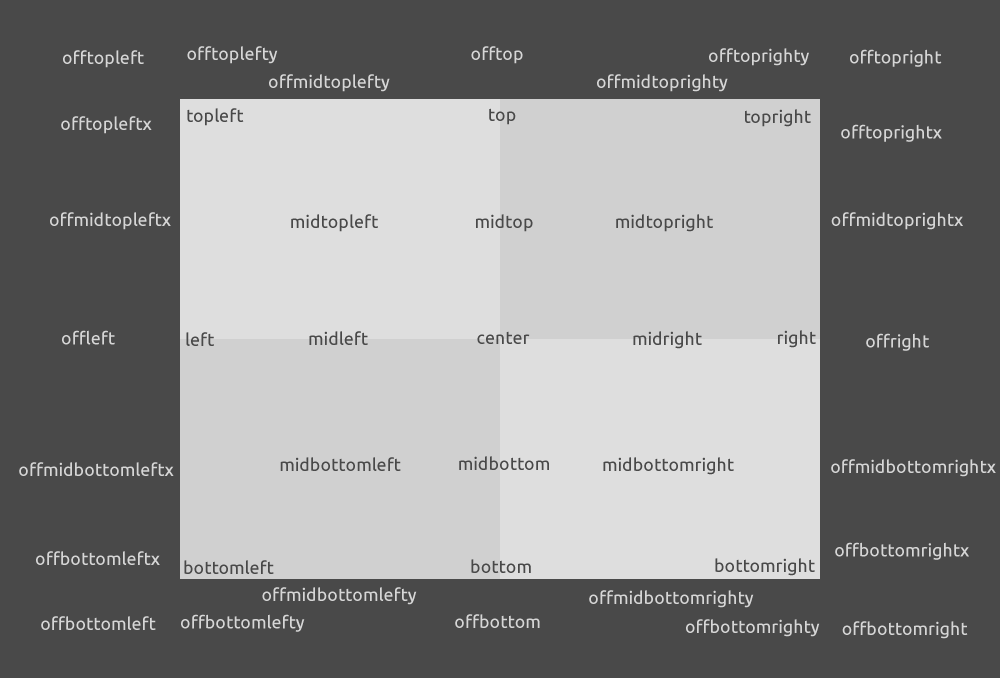
<style>
.page{position:relative;width:1000px;height:678px;background:#494949}
.page>*{position:absolute;margin:0}
.t1{font:18px "Ubuntu";color:#d6d6d6}
.t2{font:18px "Ubuntu";color:#494949}
</style>
<div class="page">
<p class="t1" style="left:63px;top:50px;width:81px;height:18px">offtopleft</p>
<p class="t1" style="left:187px;top:46px;width:91px;height:18px">offtoplefty</p>
<p class="t1" style="left:471px;top:46px;width:52px;height:18px">offtop</p>
<p class="t1" style="left:709px;top:48px;width:100px;height:18px">offtoprighty</p>
<p class="t1" style="left:850px;top:49px;width:92px;height:18px">offtopright</p>
<p class="t1" style="left:269px;top:74px;width:121px;height:18px">offmidtoplefty</p>
<p class="t1" style="left:597px;top:74px;width:131px;height:18px">offmidtoprighty</p>
<p class="t2" style="left:187px;top:108px;width:57px;height:18px">topleft</p>
<p class="t2" style="left:489px;top:108px;width:27px;height:17px">top</p>
<p class="t2" style="left:745px;top:109px;width:66px;height:18px">topright</p>
<p class="t1" style="left:61px;top:116px;width:91px;height:18px">offtopleftx</p>
<p class="t1" style="left:841px;top:124px;width:101px;height:18px">offtoprightx</p>
<p class="t1" style="left:50px;top:212px;width:121px;height:18px">offmidtopleftx</p>
<p class="t2" style="left:291px;top:214px;width:87px;height:18px">midtopleft</p>
<p class="t2" style="left:476px;top:214px;width:57px;height:18px">midtop</p>
<p class="t2" style="left:616px;top:214px;width:97px;height:18px">midtopright</p>
<p class="t1" style="left:831px;top:212px;width:132px;height:18px">offmidtoprightx</p>
<p class="t1" style="left:62px;top:330px;width:53px;height:15px">offleft</p>
<p class="t2" style="left:186px;top:332px;width:28px;height:14px">left</p>
<p class="t2" style="left:309px;top:331px;width:59px;height:14px">midleft</p>
<p class="t2" style="left:477px;top:331px;width:53px;height:13px">center</p>
<p class="t2" style="left:633px;top:331px;width:69px;height:18px">midright</p>
<p class="t2" style="left:778px;top:330px;width:38px;height:18px">right</p>
<p class="t1" style="left:866px;top:333px;width:63px;height:18px">offright</p>
<p class="t1" style="left:19px;top:462px;width:155px;height:14px">offmidbottomleftx</p>
<p class="t2" style="left:280px;top:457px;width:121px;height:14px">midbottomleft</p>
<p class="t2" style="left:459px;top:456px;width:90px;height:14px">midbottom</p>
<p class="t2" style="left:603px;top:457px;width:131px;height:18px">midbottomright</p>
<p class="t1" style="left:831px;top:459px;width:165px;height:18px">offmidbottomrightx</p>
<p class="t1" style="left:835px;top:542px;width:134px;height:18px">offbottomrightx</p>
<p class="t1" style="left:36px;top:551px;width:124px;height:14px">offbottomleftx</p>
<p class="t2" style="left:715px;top:558px;width:100px;height:18px">bottomright</p>
<p class="t2" style="left:184px;top:560px;width:90px;height:14px">bottomleft</p>
<p class="t2" style="left:471px;top:559px;width:60px;height:14px">bottom</p>
<p class="t1" style="left:262px;top:587px;width:155px;height:18px">offmidbottomlefty</p>
<p class="t1" style="left:589px;top:590px;width:165px;height:18px">offmidbottomrighty</p>
<p class="t1" style="left:41px;top:616px;width:115px;height:14px">offbottomleft</p>
<p class="t1" style="left:181px;top:614px;width:124px;height:18px">offbottomlefty</p>
<p class="t1" style="left:455px;top:614px;width:85px;height:14px">offbottom</p>
<p class="t1" style="left:686px;top:619px;width:134px;height:18px">offbottomrighty</p>
<p class="t1" style="left:842px;top:621px;width:126px;height:18px">offbottomright</p>
</div>
